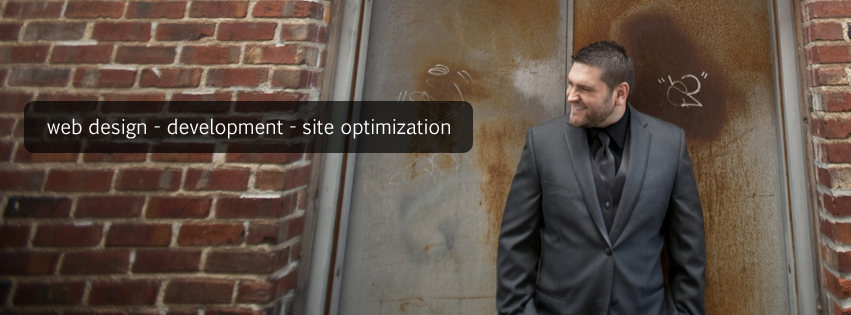
<style>
.page{position:relative;width:851px;height:315px}
.page>*{position:absolute;margin:0}
.t1{font:20px "EuphemiaCAS";color:#ffffff}
</style>
<div class="page">
<p class="t1" style="left:47px;top:118px;width:403px;height:21px">web design - development - site optimization</p>
</div>
